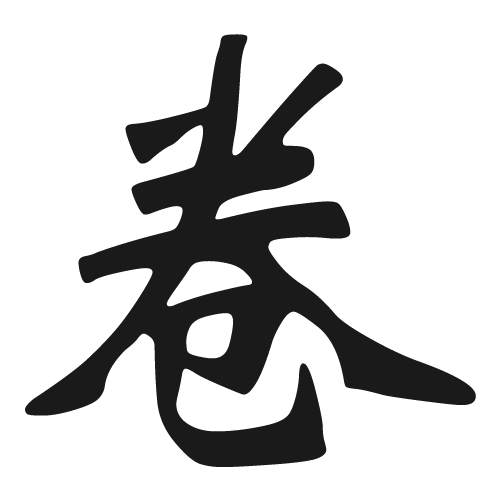
<style>
.page{position:relative;width:500px;height:500px;background:#ffffff}
.page>*{position:absolute;margin:0}
.t1{font:500px "STXinwei";color:#1a1a1a}
</style>
<div class="page">
<p class="t1" style="left:25px;top:34px;width:451px;height:433px">卷</p>
</div>
